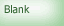
<style>
.page{position:relative;width:64px;height:26px}
.page>*{position:absolute;margin:0}
.t1{font:10.5px "Tahoma";color:#336633}
</style>
<div class="page">
<p class="t1" style="left:4px;top:5px;width:26px;height:9px">Blank</p>
</div>
